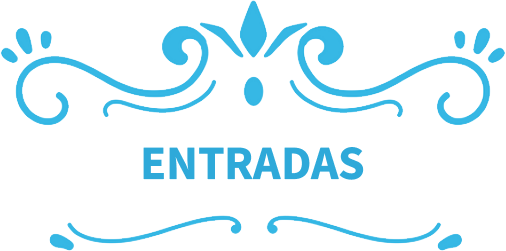
<style>
.page{position:relative;width:506px;height:251px;background:#ffffff}
.page>*{position:absolute;margin:0}
.t1{font:48px "SourceSans3Roman-Bold";color:#2ea9d9}
</style>
<div class="page">
<p class="t1" style="left:143px;top:147px;width:221px;height:33px">ENTRADAS</p>
</div>
